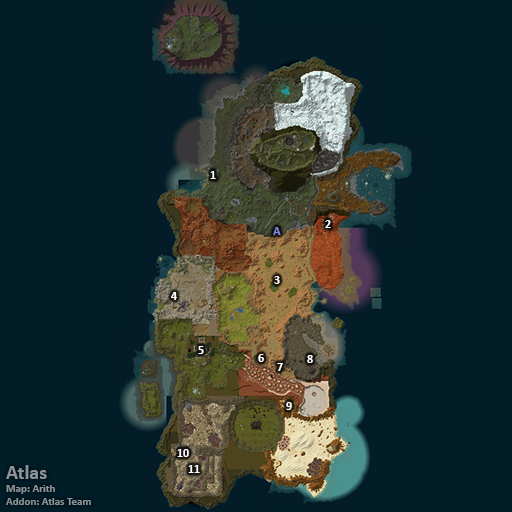
<style>
.page{position:relative;width:512px;height:512px;background:#001d28}
.page>*{position:absolute;margin:0}
.t1{font:12px "Calibri-Bold";color:#ffffff}
.t2{font:12px "Calibri-Bold";color:#8788ee}
.t3{font:11px "Calibri-Bold";color:#8d9396}
.t4{font:20px "Calibri-Bold";color:#8d9396}
</style>
<div class="page">
<p class="t1" style="left:210px;top:171px;width:6px;height:8px">1</p>
<p class="t1" style="left:325px;top:220px;width:6px;height:8px">2</p>
<p class="t2" style="left:273px;top:227px;width:8px;height:8px">A</p>
<p class="t1" style="left:274px;top:276px;width:6px;height:8px">3</p>
<p class="t1" style="left:171px;top:292px;width:6px;height:8px">4</p>
<p class="t1" style="left:198px;top:346px;width:6px;height:8px">5</p>
<p class="t1" style="left:258px;top:354px;width:6px;height:8px">6</p>
<p class="t1" style="left:277px;top:363px;width:6px;height:8px">7</p>
<p class="t1" style="left:307px;top:355px;width:6px;height:8px">8</p>
<p class="t1" style="left:286px;top:402px;width:6px;height:8px">9</p>
<p class="t1" style="left:177px;top:449px;width:12px;height:8px">10</p>
<p class="t3" style="left:6px;top:465px;width:85px;height:40px"><span class="t4">Atlas<br></span>Map: Arith<br>Addon: Atlas Team</p>
<p class="t1" style="left:188px;top:465px;width:12px;height:8px">11</p>
</div>
